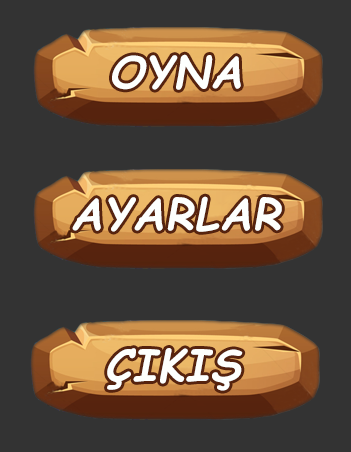
<style>
.page{position:relative;width:351px;height:452px;background:#333333}
.page>*{position:absolute;margin:0}
.t1{font:43.9px "ComicSansMS-Bold";letter-spacing:0.02em;color:#fdfffd;font-style:italic}
</style>
<div class="page">
<p class="t1" style="left:112px;top:54px;width:129px;height:36px">OYNA</p>
<p class="t1" style="left:72px;top:196px;width:210px;height:36px">AYARLAR</p>
<p class="t1" style="left:107px;top:348px;width:136px;height:43px">ÇIKIŞ</p>
</div>
